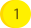
<style>
.page{position:relative;width:31px;height:28px;background:#fff000}
.page>*{position:absolute;margin:0}
.t1{font:16px "MyriadPro-Regular";color:#726208}
</style>
<div class="page">
<p class="t1" style="left:14px;top:8px;width:4px;height:12px">1</p>
</div>
